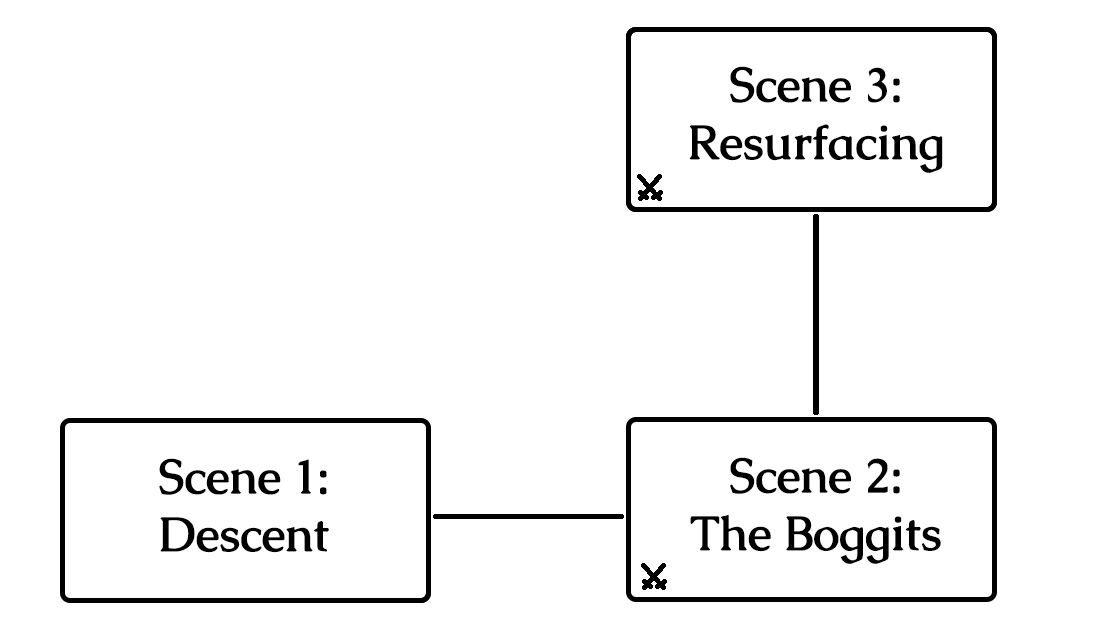
<style>
.page{position:relative;width:1100px;height:640px;background:#ffffff}
.page>*{position:absolute;margin:0}
.t1{font:48px "Caudex-Bold";color:#000000}
</style>
<div class="page">
<p class="t1" style="left:689px;top:66px;width:254px;height:107px;text-align:center">Scene 3:<br>Resurfacing</p>
<p class="t1" style="left:159px;top:458px;width:170px;height:95px;text-align:center">Scene 1:<br>Descent</p>
<p class="t1" style="left:690px;top:457px;width:251px;height:107px;text-align:center">Scene 2:<br>The Boggits</p>
</div>
